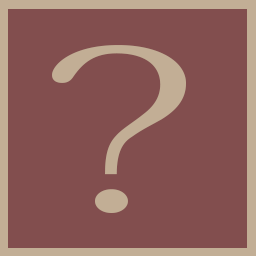
<style>
.page{position:relative;width:256px;height:256px;background:#824e4e}
.page>*{position:absolute;margin:0}
.t1{font:220.2px "AdobeKaitiStd-Regular";color:#c2ae95;scale:1.47 1}
</style>
<div class="page">
<p class="t1" style="left:52px;top:45px;width:134px;height:168px">?</p>
</div>
